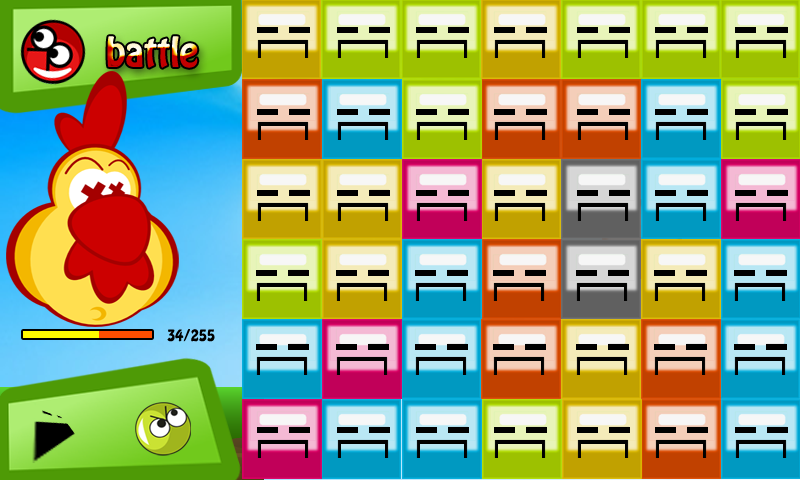
<style>
.page{position:relative;width:800px;height:480px}
.page>*{position:absolute;margin:0}
.t1{font:36px "HoboStd"}
.t2{font:14px "HoboStd";color:#000000}
</style>
<div class="page">
<p class="t1" style="left:107px;top:36px;width:91px;height:32px">battle</p>
<p class="t2" style="left:167px;top:329px;width:48px;height:13px">34/255</p>
</div>
